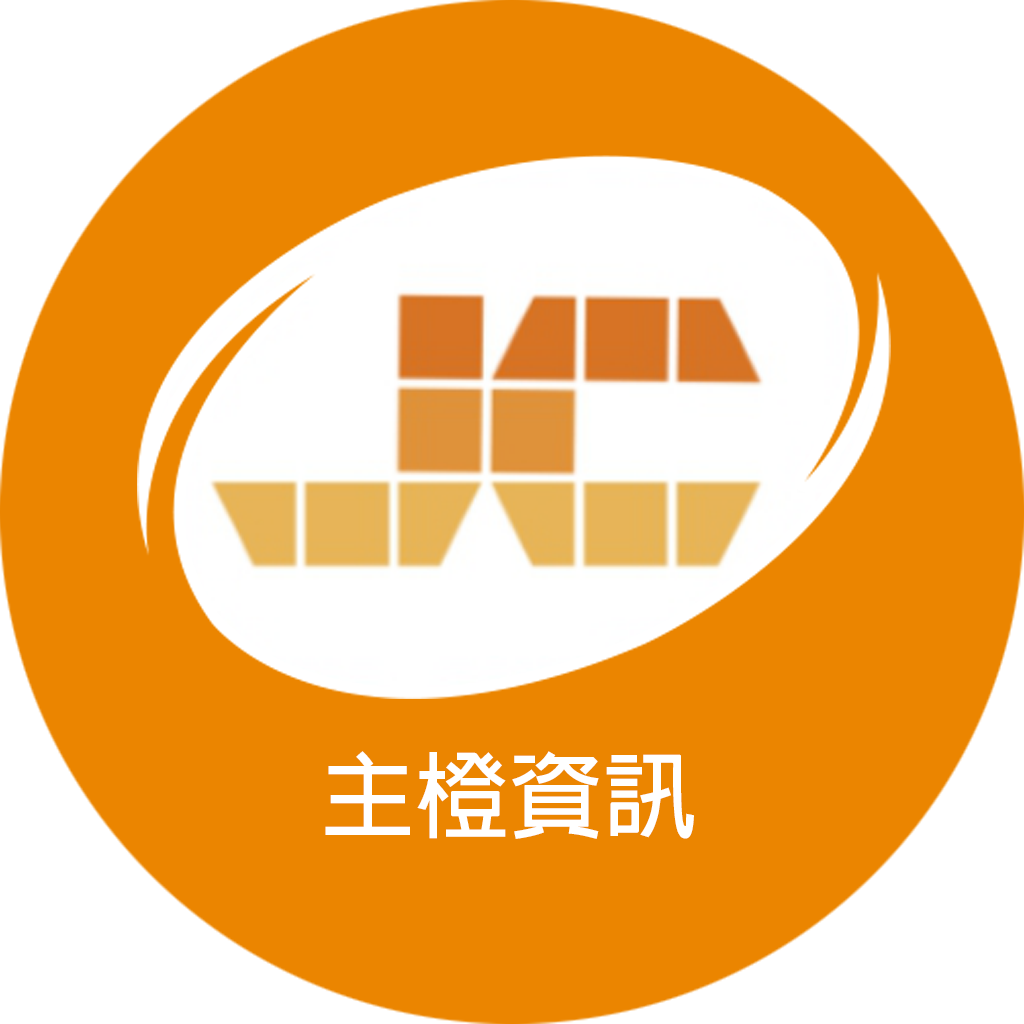
<style>
.page{position:relative;width:1024px;height:1024px;background:#eb8500}
.page>*{position:absolute;margin:0}
.t1{font:94px "AdobeFanHeitiStd-Bold";color:#ffffff}
</style>
<div class="page">
<p class="t1" style="left:325px;top:751px;width:369px;height:88px">主橙資訊</p>
</div>
